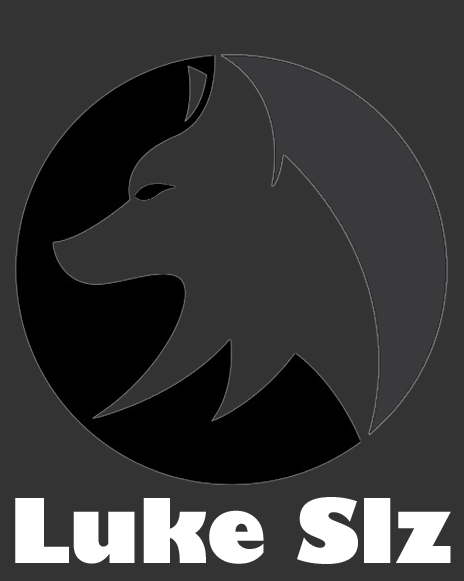
<style>
.page{position:relative;width:464px;height:581px;background:#333333}
.page>*{position:absolute;margin:0}
.t1{font:87.2px "GillSans-UltraBold";color:#ffffff}
</style>
<div class="page">
<p class="t1" style="left:15px;top:497px;width:436px;height:67px">Luke Slz</p>
</div>
